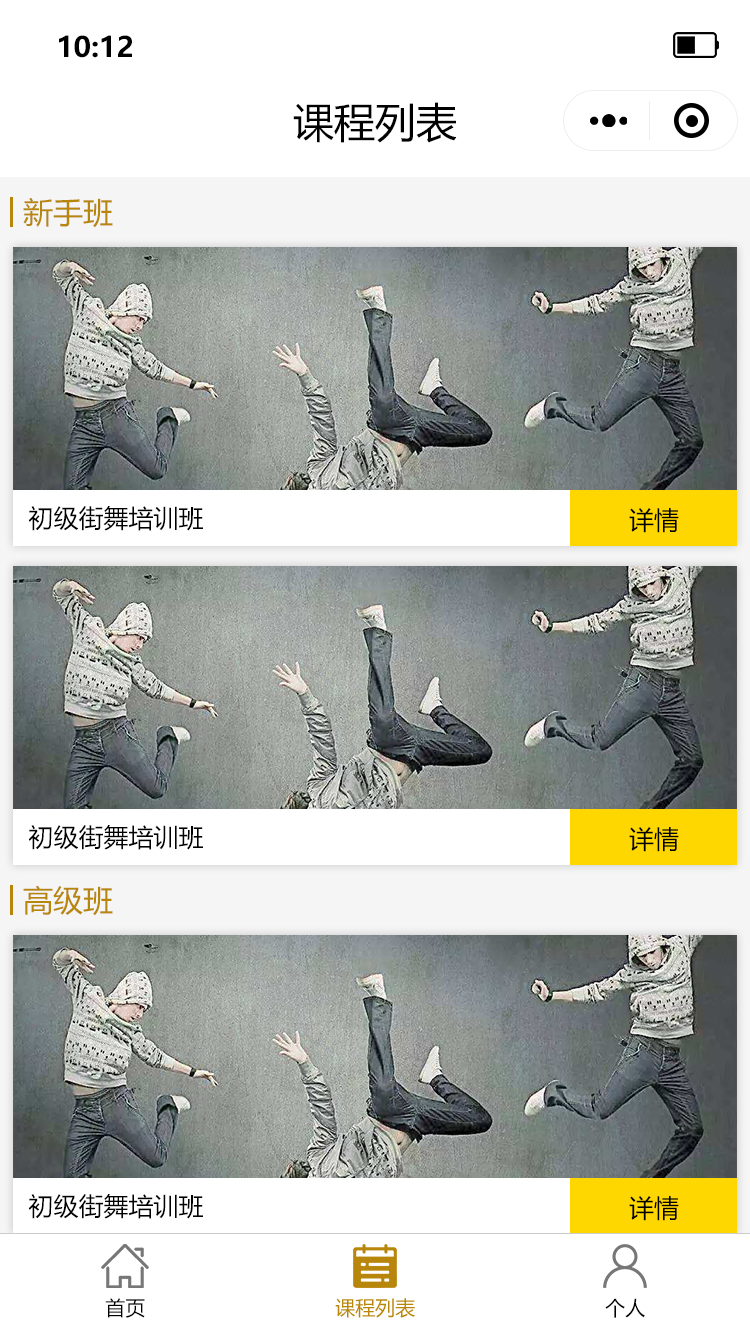
<style>
.page{position:relative;width:750px;height:1334px;background:#ffffff}
.page>*{position:absolute;margin:0}
.t1{font:28.1px "MicrosoftYaHei-Bold";color:#000000}
.t2{font:41px "MicrosoftYaHei";color:#000000}
.t3{font:30px "MicrosoftYaHei";color:#b8860b}
.t4{font:25px "MicrosoftYaHei";color:#000000}
.t5{font:20px "MicrosoftYaHei";color:#000000}
.t6{font:20px "MicrosoftYaHei";color:#b8860b}
</style>
<div class="page">
<p class="t1" style="left:59px;top:35px;width:73px;height:23px">10:12</p>
<p class="t2" style="left:293px;top:102px;width:164px;height:41px">课程列表</p>
<p class="t3" style="left:23px;top:197px;width:90px;height:31px">新手班</p>
<p class="t4" style="left:28px;top:506px;width:175px;height:25px">初级街舞培训班</p>
<p class="t4" style="left:629px;top:508px;width:50px;height:25px">详情</p>
<p class="t4" style="left:28px;top:825px;width:175px;height:25px">初级街舞培训班</p>
<p class="t4" style="left:629px;top:827px;width:50px;height:25px">详情</p>
<p class="t3" style="left:23px;top:885px;width:90px;height:31px">高级班</p>
<p class="t4" style="left:28px;top:1194px;width:175px;height:25px">初级街舞培训班</p>
<p class="t4" style="left:629px;top:1196px;width:50px;height:25px">详情</p>
<p class="t5" style="left:105px;top:1298px;width:40px;height:20px">首页</p>
<p class="t6" style="left:335px;top:1298px;width:80px;height:20px">课程列表</p>
<p class="t5" style="left:605px;top:1298px;width:40px;height:20px">个人</p>
</div>
